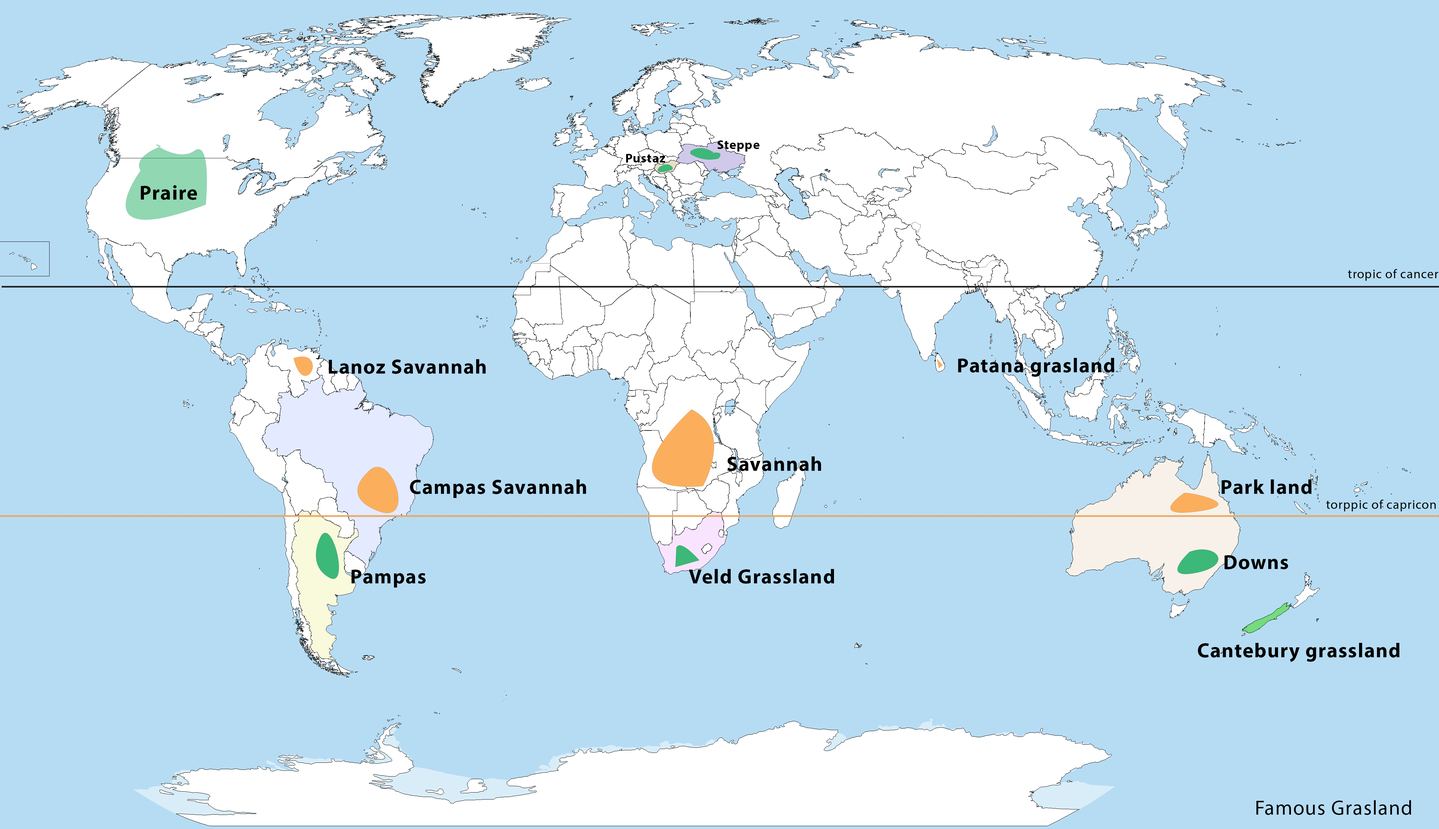
<style>
.page{position:relative;width:1439px;height:829px;background:#b6dcf4}
.page>*{position:absolute;margin:0}
.t1{font:12.8px "MyriadHebrew-Bold";letter-spacing:0.04em;color:#000000}
.t2{font:20.5px "MyriadHebrew-Bold";letter-spacing:0.04em;color:#000000}
.t3{font:12.8px "MyriadHebrew-Regular";letter-spacing:0.04em;color:#000000}
.t4{font:20.5px "MyriadHebrew-Regular";letter-spacing:0.04em;color:#000000}
</style>
<div class="page">
<p class="t1" style="left:717px;top:140px;width:42px;height:12px">Steppe</p>
<p class="t1" style="left:626px;top:154px;width:39px;height:8px">Pustaz</p>
<p class="t2" style="left:141px;top:185px;width:56px;height:15px">Praire</p>
<p class="t3" style="left:1348px;top:269px;width:90px;height:12px">tropic of cancer</p>
<p class="t2" style="left:329px;top:359px;width:157px;height:15px">Lanoz Savannah</p>
<p class="t2" style="left:958px;top:358px;width:156px;height:19px">Patana grasland</p>
<p class="t2" style="left:727px;top:456px;width:94px;height:15px">Savannah</p>
<p class="t2" style="left:410px;top:479px;width:176px;height:19px">Campas Savannah</p>
<p class="t2" style="left:1221px;top:479px;width:91px;height:15px">Park land</p>
<p class="t3" style="left:1326px;top:499px;width:110px;height:12px">torppic of capricon</p>
<p class="t2" style="left:1224px;top:555px;width:64px;height:14px">Downs</p>
<p class="t2" style="left:351px;top:569px;width:75px;height:18px">Pampas</p>
<p class="t2" style="left:689px;top:569px;width:145px;height:15px">Veld Grassland</p>
<p class="t2" style="left:1198px;top:643px;width:201px;height:19px">Cantebury grassland</p>
<p class="t4" style="left:1256px;top:800px;width:155px;height:15px">Famous Grasland</p>
</div>
